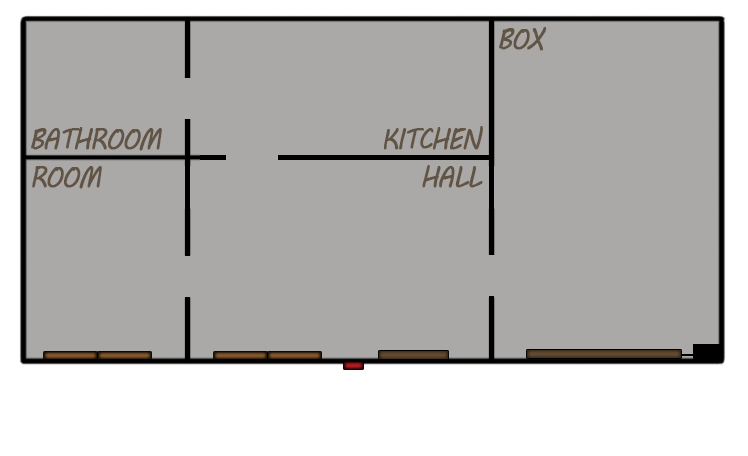
<style>
.page{position:relative;width:748px;height:456px;background:#aaa9a8}
.page>*{position:absolute;margin:0}
.t1{font:29.2px "MVBoli";letter-spacing:-0.06em;color:#615445;font-weight:bold;scale:0.82 1}
</style>
<div class="page">
<p class="t1" style="left:499px;top:27px;width:48px;height:24px">BOX</p>
<p class="t1" style="left:384px;top:126px;width:99px;height:24px">KITCHEN</p>
<p class="t1" style="left:31px;top:127px;width:131px;height:24px">BATHROOM</p>
<p class="t1" style="left:32px;top:166px;width:70px;height:23px">ROOM</p>
<p class="t1" style="left:422px;top:165px;width:61px;height:23px">HALL</p>
</div>
